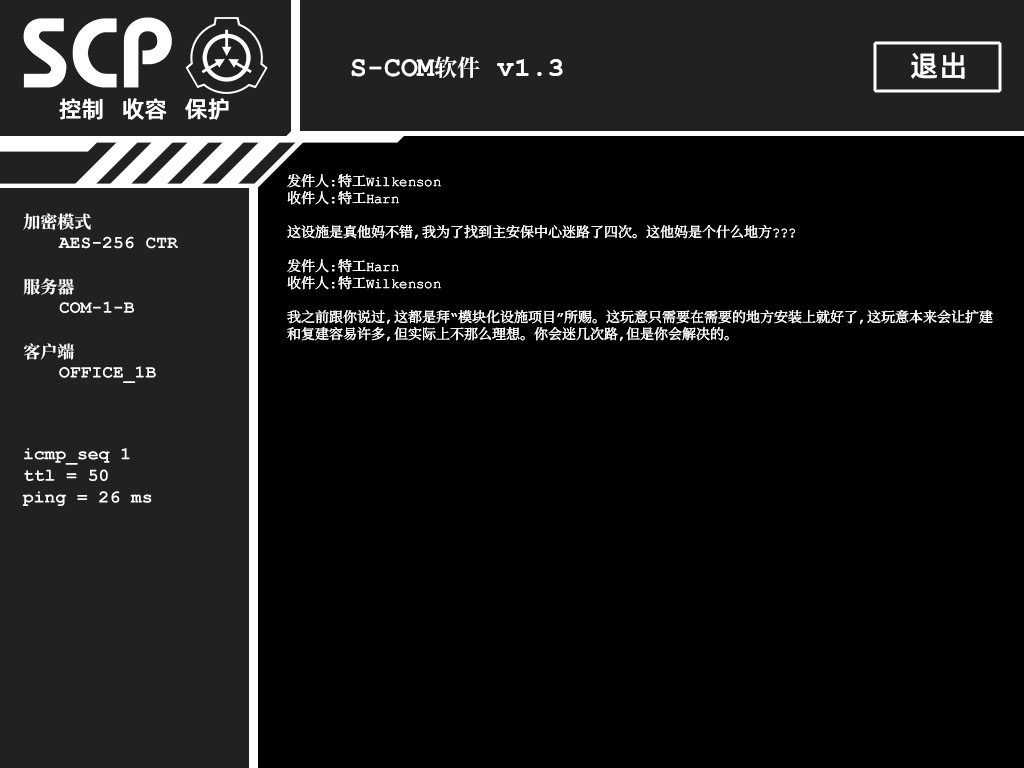
<style>
.page{position:relative;width:1024px;height:768px;background:#000000}
.page>*{position:absolute;margin:0}
.t1{font:29px "AlibabaPuHuiTiM";color:#ffffff}
.t2{font:28px "ContainmentBreach-Bold";color:#ffffff}
.t3{font:23px "ContainmentBreach-Bold";color:#ffffff}
.t4{font:28px "CourierNewPS-BoldMT";color:#ffffff}
.t5{font:23px "AlibabaPuHuiTiM";color:#ffffff}
.t6{font:14px/17px "ContainmentBreach-Regular";color:#ffffff}
.t7{font:17px/15px "ContainmentBreach-Bold";color:#ffffff}
.t8{font:17px/17px "ContainmentBreach-Bold";color:#ffffff}
.t9{font:17px/13px "ContainmentBreach-Bold";color:#ffffff}
</style>
<div class="page">
<p class="t1" style="left:911px;top:52px;width:54px;height:27px">退出</p>
<p class="t2" style="left:351px;top:56px;width:212px;height:22px">S-COM<span class="t3">软件 </span><span class="t4">v1.3</span></p>
<p class="t5" style="left:59px;top:98px;width:170px;height:22px">控制   收容   保护</p>
<p class="t6" style="left:287px;top:174px;width:706px;height:168px">发件人：特工Wilkenson<br>收件人：特工Harn<br><br>这设施是真他妈不错，我为了找到主安保中心迷路了四次。这他妈是个什么地方？？？<br><br>发件人：特工Harn<br>收件人：特工Wilkenson<br><br>我之前跟你说过，这都是拜“模块化设施项目”所赐。这玩意只需要在需要的地方安装上就好了，这玩意本来会让扩建<br>和复建容易许多，但实际上不那么理想。你会迷几次路，但是你会解决的。</p>
<p class="t7" style="left:23px;top:213px;width:68px;height:147px">加密模式<br><br><br><span class="t8"><br>服务器<br><br><br></span><span class="t9"><br>客户端</span></p>
</div>
